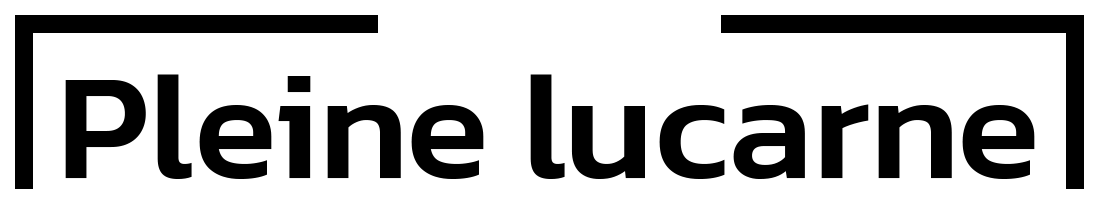
<style>
.page{position:relative;width:1099px;height:204px;background:#ffffff}
.page>*{position:absolute;margin:0}
.t1{font:152.7px "Kanit-Medium";color:#000000}
</style>
<div class="page">
<p class="t1" style="left:65px;top:74px;width:970px;height:105px">Pleine lucarne</p>
</div>
